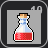
<style>
.page{position:relative;width:48px;height:48px;background:#242426}
.page>*{position:absolute;margin:0}
.t1{font:11px "Arial-BoldMT";color:#b5b5b7}
</style>
<div class="page">
<p class="t1" style="left:31px;top:6px;width:12px;height:8px">10</p>
</div>
